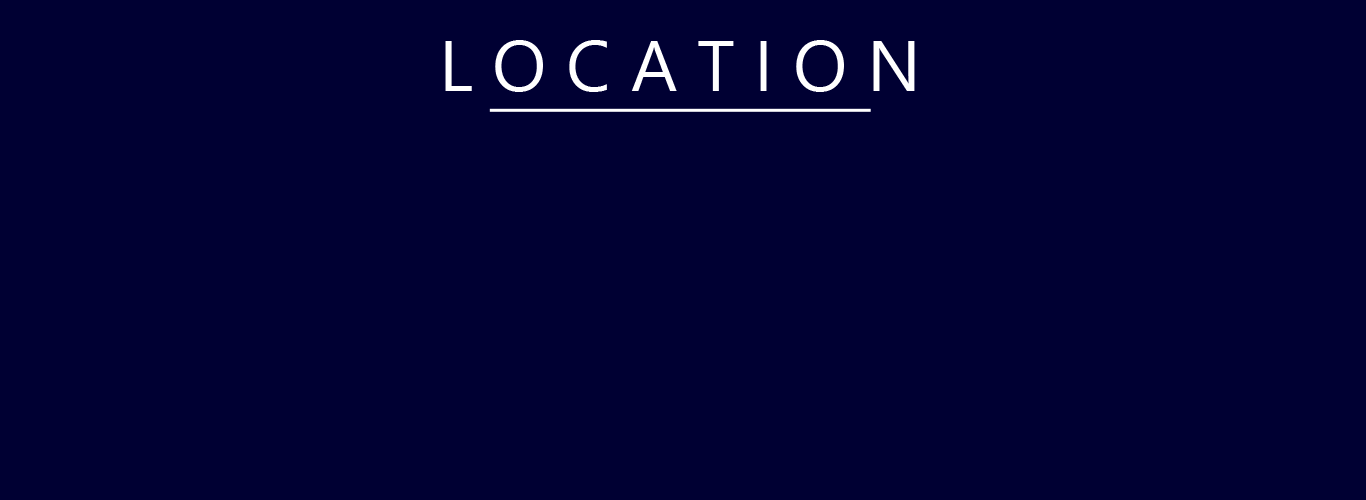
<style>
.page{position:relative;width:1366px;height:500px;background:#000033}
.page>*{position:absolute;margin:0}
.t1{font:72px "SegoeUI";color:#ffffff}
</style>
<div class="page">
<p class="t1" style="left:445px;top:40px;width:470px;height:52px">L O C A T I O N</p>
</div>
